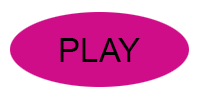
<style>
.page{position:relative;width:200px;height:100px;background:#d00d89}
.page>*{position:absolute;margin:0}
.t1{font:33.3px "ArialMT";color:#000000;font-variant:small-caps}
</style>
<div class="page">
<p class="t1" style="left:60px;top:38px;width:80px;height:24px">PLAY</p>
</div>
